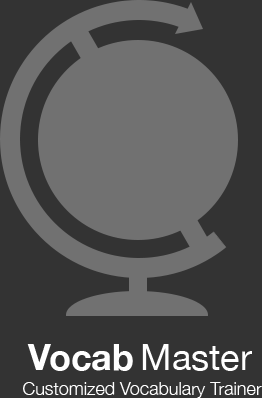
<style>
.page{position:relative;width:262px;height:398px;background:#333333}
.page>*{position:absolute;margin:0}
.t1{font:36px "HelveticaNeue-Bold";color:#ffffff}
.t2{font:36px "HelveticaNeue";color:#ffffff}
.t3{font:18px "HelveticaNeue-Light";color:#ffffff}
</style>
<div class="page">
<p class="t1" style="left:27px;top:344px;width:106px;height:27px">Vocab</p>
<p class="t2" style="left:142px;top:344px;width:110px;height:27px">Master</p>
<p class="t3" style="left:23px;top:382px;width:239px;height:16px">Customized Vocabulary Trainer</p>
</div>
